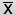
<style>
.page{position:relative;width:16px;height:16px}
.page>*{position:absolute;margin:0}
.t1{font:12.5px "ArialMT";color:#000000}
</style>
<div class="page">
<p class="t1" style="left:3px;top:4px;width:10px;height:10px">X</p>
<p class="t1" style="left:3px;top:4px;width:10px;height:10px">X</p>
</div>
